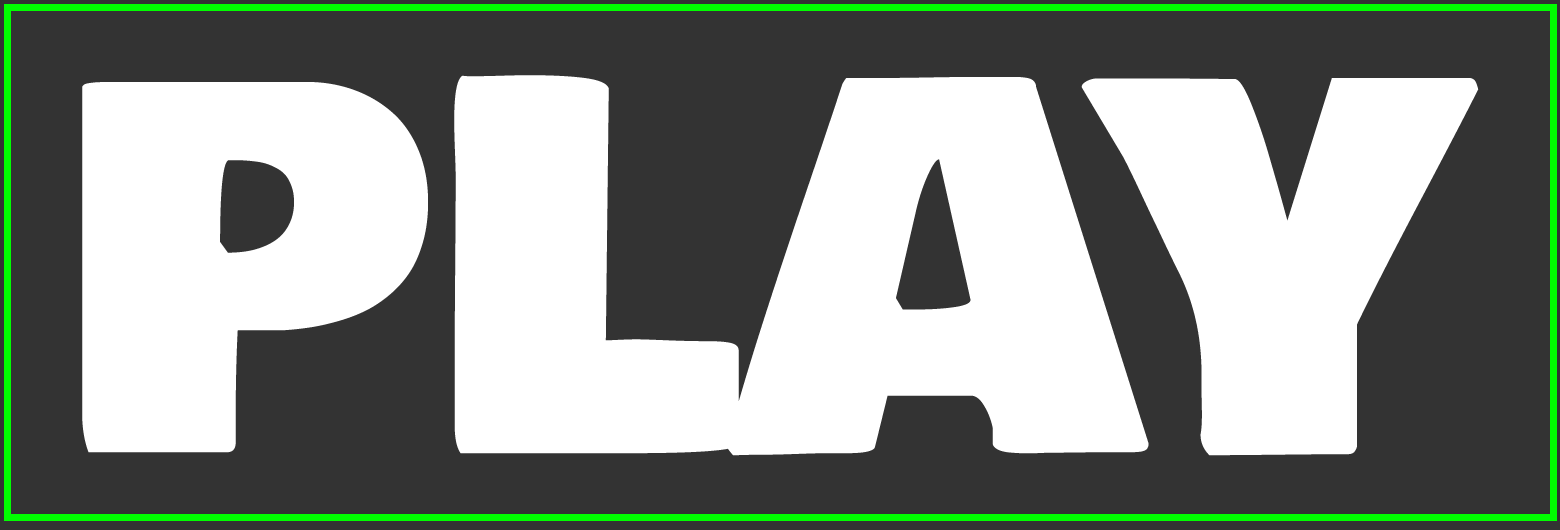
<style>
.page{position:relative;width:1560px;height:530px;background:#333333}
.page>*{position:absolute;margin:0}
.t1{font:500px "BowlbyOneSC-Regular";color:#ffffff}
</style>
<div class="page">
<p class="t1" style="left:82px;top:75px;width:1397px;height:381px">PLAY</p>
</div>
